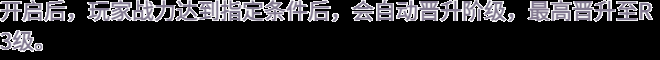
<style>
.page{position:relative;width:660px;height:60px;background:#000000}
.page>*{position:absolute;margin:0}
.t1{font:22px/30px "WebPSD-18463539-0-Regular";color:#837a91;font-weight:bold}
</style>
<div class="page">
<p class="t1" style="left:0px;top:0px;width:660px;height:60px">开启后，玩家战力达到指定条件后，会自动晋升阶级，最高晋升至R <br>3级。</p>
</div>
